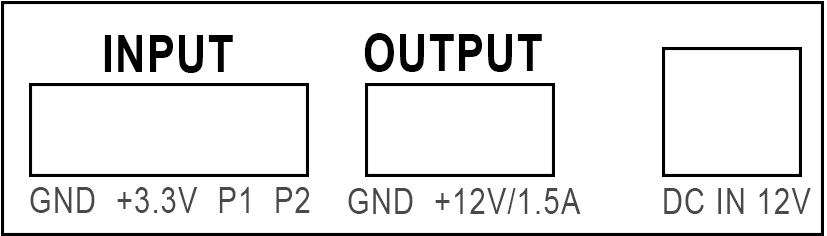
<style>
.page{position:relative;width:827px;height:236px;background:#ffffff}
.page>*{position:absolute;margin:0}
.t1{font:51.3px "Arial-BoldMT";letter-spacing:0.04em;color:#000000;scale:0.81 1}
.t2{font:35.9px "ArialMT";letter-spacing:0.04em;color:#494949;scale:0.81 1}
</style>
<div class="page">
<p class="t1" style="left:104px;top:35px;width:129px;height:38px">INPUT</p>
<p class="t1" style="left:364px;top:33px;width:178px;height:39px">OUTPUT</p>
<p class="t2" style="left:30px;top:187px;width:280px;height:26px">GND  +3.3V  P1  P2</p>
<p class="t2" style="left:348px;top:188px;width:233px;height:26px">GND  +12V/1.5A</p>
<p class="t2" style="left:664px;top:188px;width:147px;height:26px">DC IN 12V</p>
</div>
